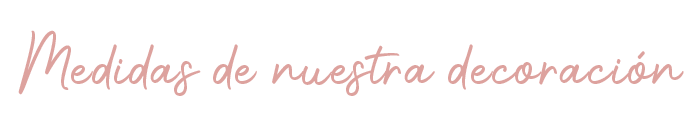
<style>
.page{position:relative;width:700px;height:140px;background:#ffffff}
.page>*{position:absolute;margin:0}
.t1{font:37.5px "Photoshoot-Regular";letter-spacing:0.025em;color:#dda29e}
</style>
<div class="page">
<p class="t1" style="left:18px;top:30px;width:666px;height:66px;text-align:center">Medidas de nuestra decoración</p>
</div>
